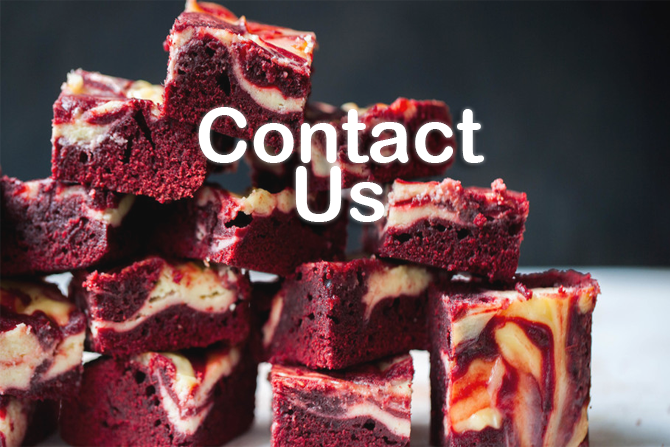
<style>
.page{position:relative;width:670px;height:447px}
.page>*{position:absolute;margin:0}
.t1{font:74.7px/58.7px "ArialRoundedMTBold";color:#ffffff}
</style>
<div class="page">
<p class="t1" style="left:198px;top:107px;width:286px;height:115px;text-align:center">Contact<br>Us</p>
</div>
